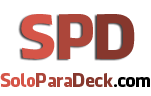
<style>
.page{position:relative;width:151px;height:96px;background:#ffffff}
.page>*{position:absolute;margin:0}
.t1{font:60px "FacebookLetterFaces";color:#d55548}
.t2{font:60px "FacebookLetterFaces";color:#ac463a}
.t3{font:60px "FacebookLetterFaces";color:#86372d}
.t4{font:18px "FacebookLetterFaces";color:#d55548}
.t5{font:18px "FacebookLetterFaces";color:#ac463a}
.t6{font:18px "FacebookLetterFaces";color:#86372d}
.t7{font:18px "FacebookLetterFaces";color:#000000}
</style>
<div class="page">
<p class="t1" style="left:21px;top:14px;width:34px;height:45px">S</p>
<p class="t2" style="left:59px;top:14px;width:34px;height:45px">P</p>
<p class="t3" style="left:97px;top:14px;width:38px;height:45px">D</p>
<p class="t4" style="left:0px;top:73px;width:150px;height:14px">Solo<span class="t5">Para</span><span class="t6">Deck</span><span class="t7">.com</span></p>
</div>
